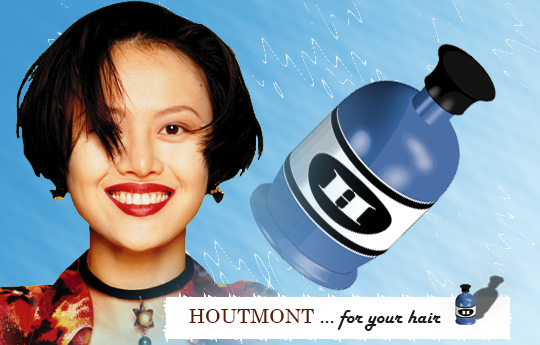
<style>
.page{position:relative;width:540px;height:345px}
.page>*{position:absolute;margin:0}
.t1{font:20px "HarlowSolid";color:#1d1c17}
.t2{font:20px "Century";color:#5b1901}
</style>
<div class="page">
<p class="t1" style="left:189px;top:309px;width:252px;height:22px"><span class="t2">HOUTMONT</span> ... for your hair</p>
</div>
